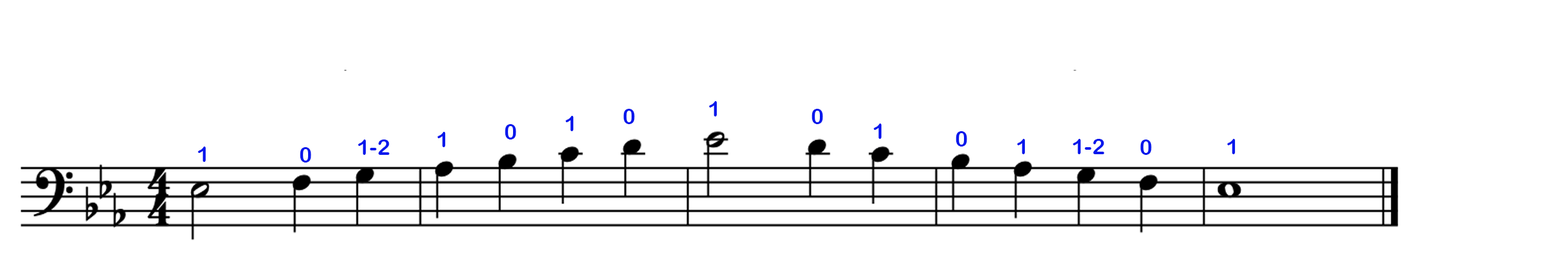
<style>
.page{position:relative;width:1568px;height:279px;background:#ffffff}
.page>*{position:absolute;margin:0}
.t1{font:21.8px "ArialRoundedMTBold";color:#0417ec}
</style>
<div class="page">
<p class="t1" style="left:709px;top:101px;width:8px;height:16px">1</p>
<p class="t1" style="left:623px;top:109px;width:12px;height:15px">0</p>
<p class="t1" style="left:812px;top:109px;width:11px;height:15px">0</p>
<p class="t1" style="left:505px;top:124px;width:11px;height:16px">0</p>
<p class="t1" style="left:566px;top:116px;width:8px;height:15px">1</p>
<p class="t1" style="left:874px;top:124px;width:8px;height:15px">1</p>
<p class="t1" style="left:437px;top:132px;width:9px;height:15px">1</p>
<p class="t1" style="left:956px;top:131px;width:11px;height:16px">0</p>
<p class="t1" style="left:198px;top:147px;width:8px;height:15px">1</p>
<p class="t1" style="left:300px;top:147px;width:11px;height:16px">0</p>
<p class="t1" style="left:358px;top:140px;width:31px;height:15px">1-2</p>
<p class="t1" style="left:1017px;top:139px;width:8px;height:15px">1</p>
<p class="t1" style="left:1073px;top:139px;width:31px;height:15px">1-2</p>
<p class="t1" style="left:1140px;top:140px;width:12px;height:15px">0</p>
<p class="t1" style="left:1227px;top:139px;width:9px;height:15px">1</p>
</div>
